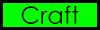
<style>
.page{position:relative;width:100px;height:30px;background:#06ff00}
.page>*{position:absolute;margin:0}
.t1{font:24px "CenturyGothic";color:#000000}
</style>
<div class="page">
<p class="t1" style="left:21px;top:5px;width:58px;height:19px">Craft</p>
</div>
